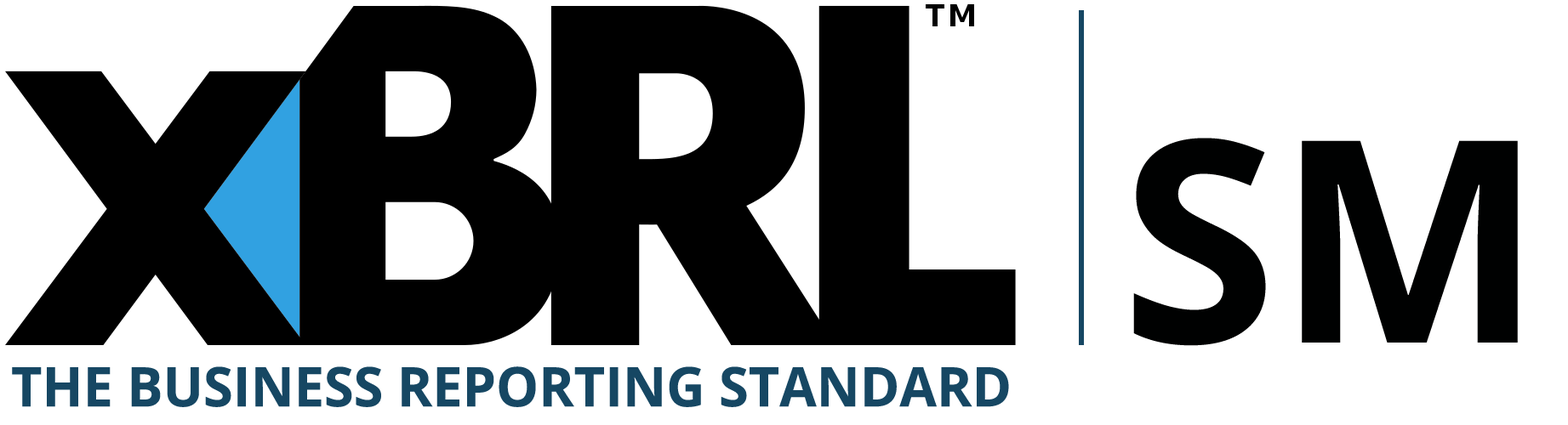
<style>
.page{position:relative;width:1568px;height:425px;background:#ffffff}
.page>*{position:absolute;margin:0}
.t1{font:282.5px "OpenSans-Bold";color:#000101}
.t2{font:54.8px "OpenSans-Bold";color:#164763}
</style>
<div class="page">
<p class="t1" style="left:1133px;top:138px;width:385px;height:208px">SM</p>
<p class="t2" style="left:12px;top:367px;width:997px;height:41px">THE BUSINESS REPORTING STANDARD</p>
</div>
